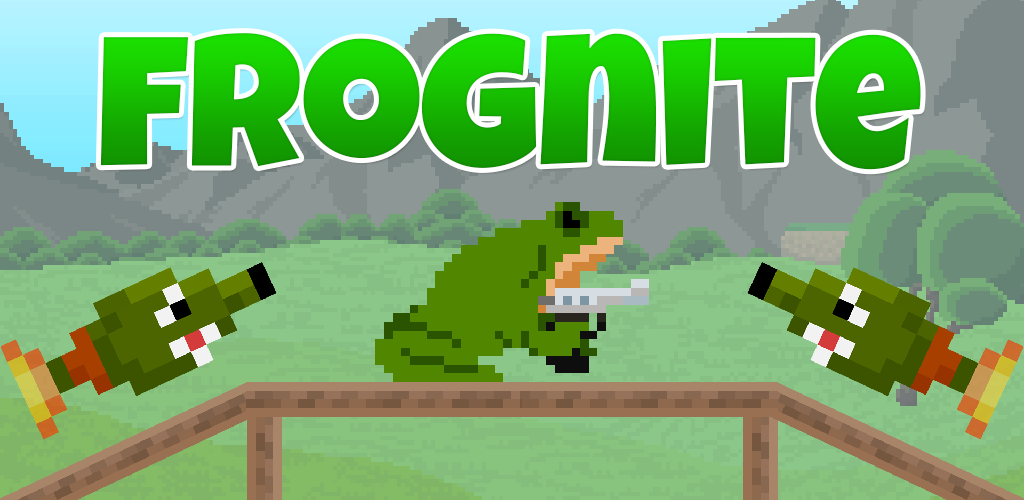
<style>
.page{position:relative;width:1024px;height:500px}
.page>*{position:absolute;margin:0}
.t1{font:186.7px "LuckiestGuy-Regular"}
</style>
<div class="page">
<p class="t1" style="left:100px;top:33px;width:821px;height:137px">frognite</p>
</div>
